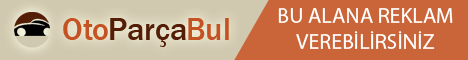
<style>
.page{position:relative;width:468px;height:60px;background:#c96539}
.page>*{position:absolute;margin:0}
.t1{font:22px "MyriadPro-Regular";color:#ffffff}
</style>
<div class="page">
<p class="t1" style="left:278px;top:8px;width:175px;height:41px;text-align:center">BU ALANA REKLAM VEREBİLİRSİNİZ</p>
</div>
